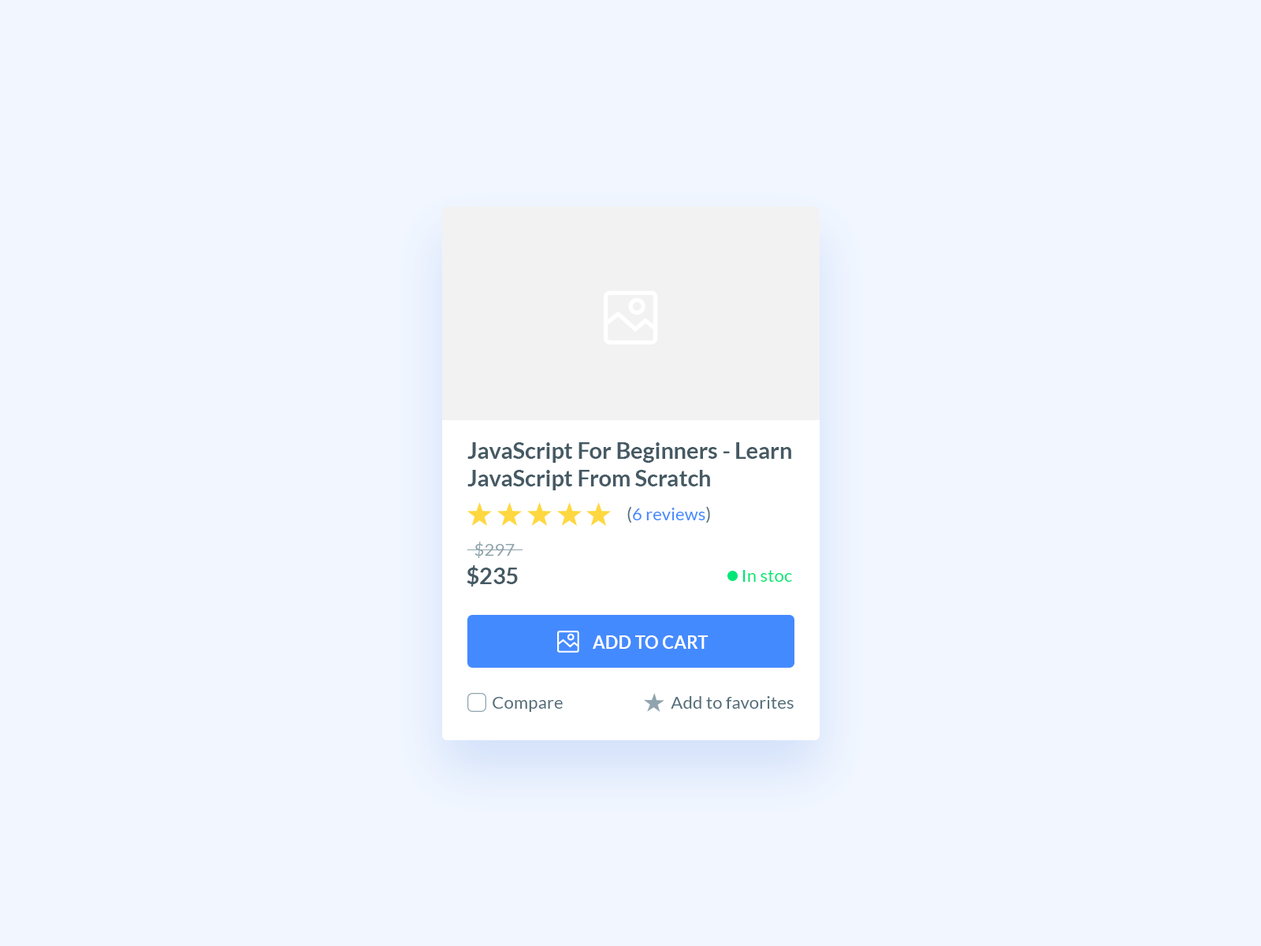
<style>
.page{position:relative;width:1261px;height:946px;background:#f2f7ff}
.page>*{position:absolute;margin:0}
.t1{font:22.7px "Lato-Bold";color:#455a64}
.t2{font:17.7px "Lato-Regular";color:#448aff}
.t3{font:17.7px "Lato-Regular";color:#546e7a}
.t4{font:17.7px "Lato-Regular";color:#90a4ae}
.t5{font:17.7px "Lato-Regular";color:#00e676}
.t6{font:17.7px "Lato-Bold";color:#ffffff;text-transform:uppercase}
</style>
<div class="page">
<p class="t1" style="left:467px;top:442px;width:324px;height:48px">JavaScript For Beginners - Learn JavaScript From Scratch</p>
<p class="t2" style="left:627px;top:506px;width:83px;height:17px"><span class="t3">(</span>6 reviews<span class="t3">)</span></p>
<p class="t4" style="left:474px;top:541px;width:41px;height:17px">$297</p>
<p class="t1" style="left:467px;top:565px;width:51px;height:21px">$235</p>
<p class="t5" style="left:742px;top:570px;width:50px;height:12px">In stoc</p>
<p class="t6" style="left:593px;top:635px;width:115px;height:14px">Add to cart</p>
<p class="t3" style="left:493px;top:697px;width:70px;height:15px">Compare</p>
<p class="t3" style="left:671px;top:696px;width:123px;height:12px">Add to favorites</p>
</div>
